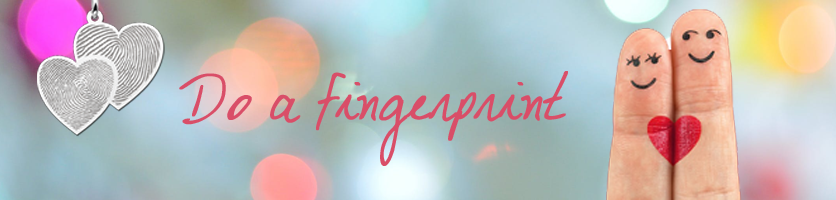
<style>
.page{position:relative;width:836px;height:200px}
.page>*{position:absolute;margin:0}
.t1{font:48px/72px "DJBMyBoyfriend'sHandwriting";color:#d94e68;font-weight:bold}
</style>
<div class="page">
<p class="t1" style="left:179px;top:71px;width:389px;height:95px;text-align:center">Do a fingerprint</p>
</div>
